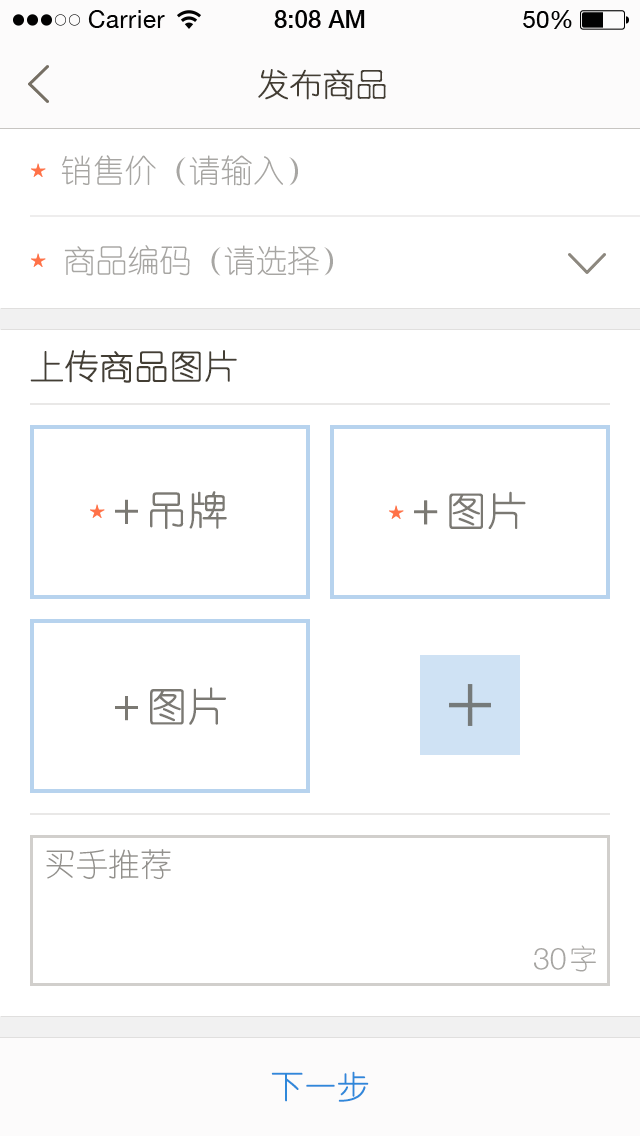
<style>
.page{position:relative;width:640px;height:1136px;background:#ffffff}
.page>*{position:absolute;margin:0}
.t1{font:32px "YouYuan";color:#433d33;text-transform:uppercase;font-weight:bold}
.t2{font:32px "YouYuan";color:#a7a6a3;text-transform:uppercase}
.t3{font:34px "YouYuan";color:#433e34;text-transform:uppercase;font-weight:bold}
.t4{font:40px "YouYuan";color:#7b7973;text-transform:uppercase;font-weight:bold}
.t5{font:32px "YouYuan";color:#93918d;text-transform:uppercase}
.t6{font:30px "HelveticaNeueLTPro-Lt";color:#a7a6a3;text-transform:uppercase}
.t7{font:28px "YouYuan";color:#a7a6a3;text-transform:uppercase}
.t8{font:32px "YouYuan";color:#2f88da;text-transform:uppercase;font-weight:bold}
</style>
<div class="page">
<p class="t1" style="left:258px;top:69px;width:128px;height:31px">发布商品</p>
<p class="t2" style="left:61px;top:155px;width:237px;height:31px">销售价（请输入）</p>
<p class="t2" style="left:64px;top:245px;width:269px;height:31px">商品编码（请选择）</p>
<p class="t3" style="left:30px;top:350px;width:207px;height:33px">上传商品图片</p>
<p class="t4" style="left:115px;top:491px;width:112px;height:39px">＋吊牌</p>
<p class="t4" style="left:414px;top:491px;width:112px;height:38px">＋图片</p>
<p class="t4" style="left:115px;top:687px;width:111px;height:38px">＋图片</p>
<p class="t5" style="left:46px;top:849px;width:125px;height:31px">买手推荐</p>
<p class="t6" style="left:534px;top:948px;width:32px;height:22px">30</p>
<p class="t7" style="left:571px;top:945px;width:25px;height:27px">字</p>
<p class="t8" style="left:271px;top:1071px;width:98px;height:31px">下一步</p>
</div>
